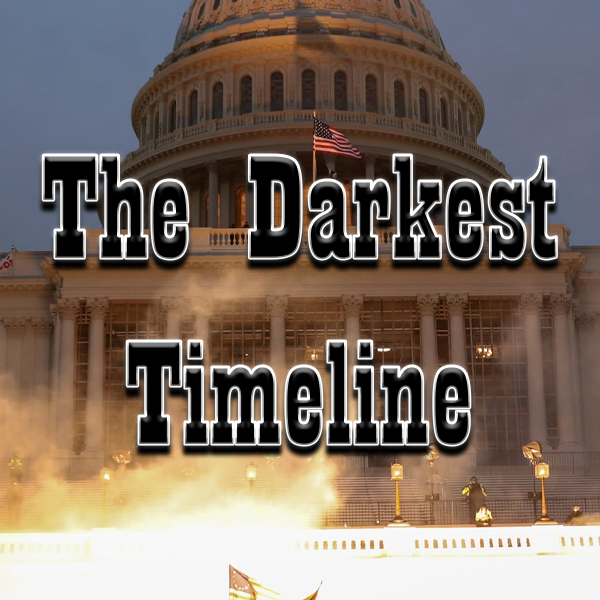
<style>
.page{position:relative;width:600px;height:600px}
.page>*{position:absolute;margin:0}
.t1{font:154.6px "Playbill";color:#000000;scale:1.17 1}
</style>
<div class="page">
<p class="t1" style="left:43px;top:155px;width:514px;height:290px;text-align:center">The Darkest<br>Timeline</p>
</div>
